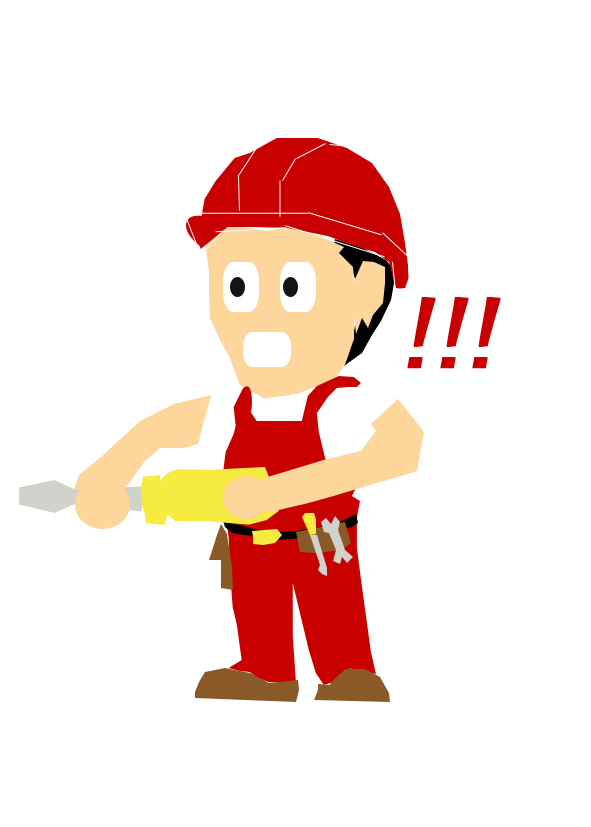
<style>
.page{position:relative;width:591px;height:827px;background:#ffffff}
.page>*{position:absolute;margin:0}
.t1{font:100px "LithosPro-Regular";letter-spacing:-0.005em;color:#c80000;font-weight:bold;font-style:italic}
</style>
<div class="page">
<p class="t1" style="left:407px;top:297px;width:94px;height:72px">!!!</p>
</div>
